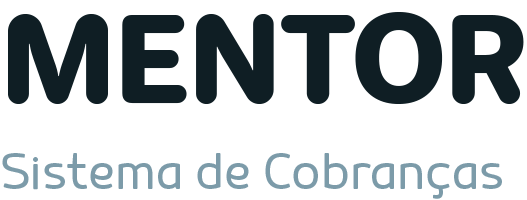
<style>
.page{position:relative;width:527px;height:200px;background:#ffffff}
.page>*{position:absolute;margin:0}
.t1{font:116.7px "Jellee-Roman";color:#0f1e24}
.t2{font:62.5px "MairyLight";color:#7c9ba9}
</style>
<div class="page">
<p class="t1" style="left:8px;top:12px;width:516px;height:92px">MENTOR</p>
<p class="t2" style="left:2px;top:153px;width:500px;height:46px">Sistema de Cobranças</p>
</div>
